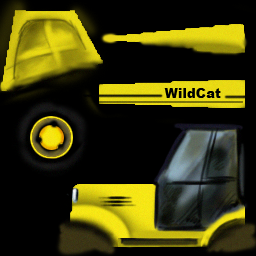
<style>
.page{position:relative;width:256px;height:256px;background:#000000}
.page>*{position:absolute;margin:0}
.t1{font:13.4px "Arial-Black";color:#000000}
</style>
<div class="page">
<p class="t1" style="left:164px;top:88px;width:57px;height:10px">WildCat</p>
</div>
